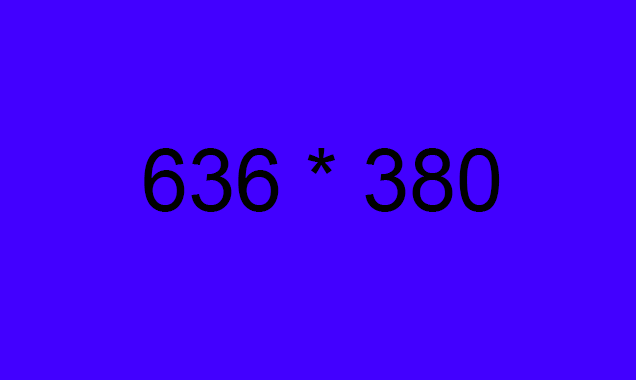
<style>
.page{position:relative;width:636px;height:380px;background:#4200ff}
.page>*{position:absolute;margin:0}
.t1{font:86.6px "ArialMT";color:#000000}
</style>
<div class="page">
<p class="t1" style="left:144px;top:148px;width:356px;height:64px">636 * 380</p>
</div>
